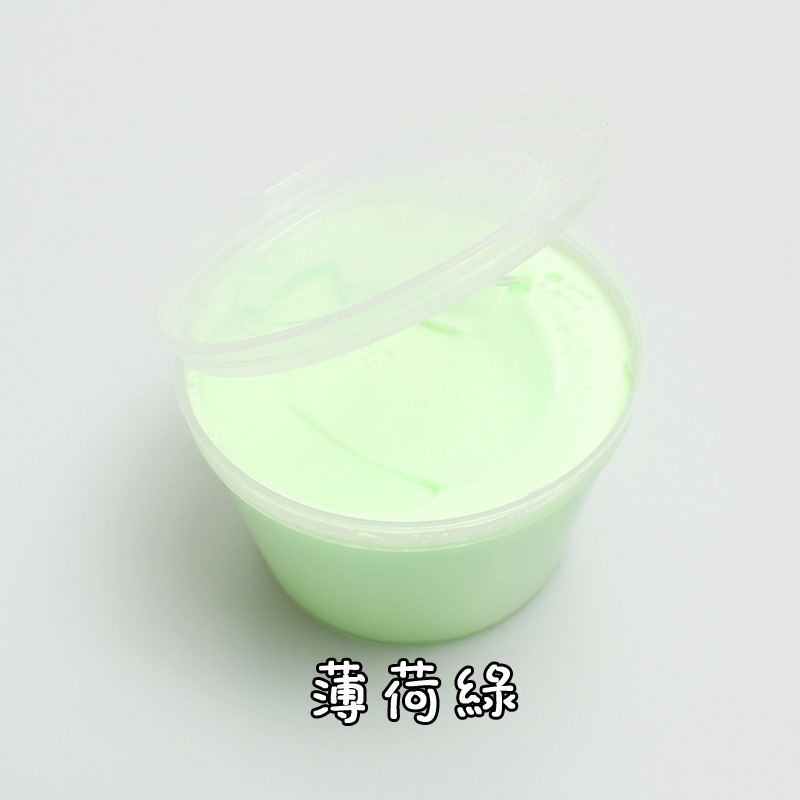
<style>
.page{position:relative;width:800px;height:800px}
.page>*{position:absolute;margin:0}
.t1{font:72px "DFPao-W4-WINP-BF";color:#ffffff;font-weight:bold}
</style>
<div class="page">
<p class="t1" style="left:313px;top:660px;width:203px;height:63px">薄荷綠</p>
</div>
